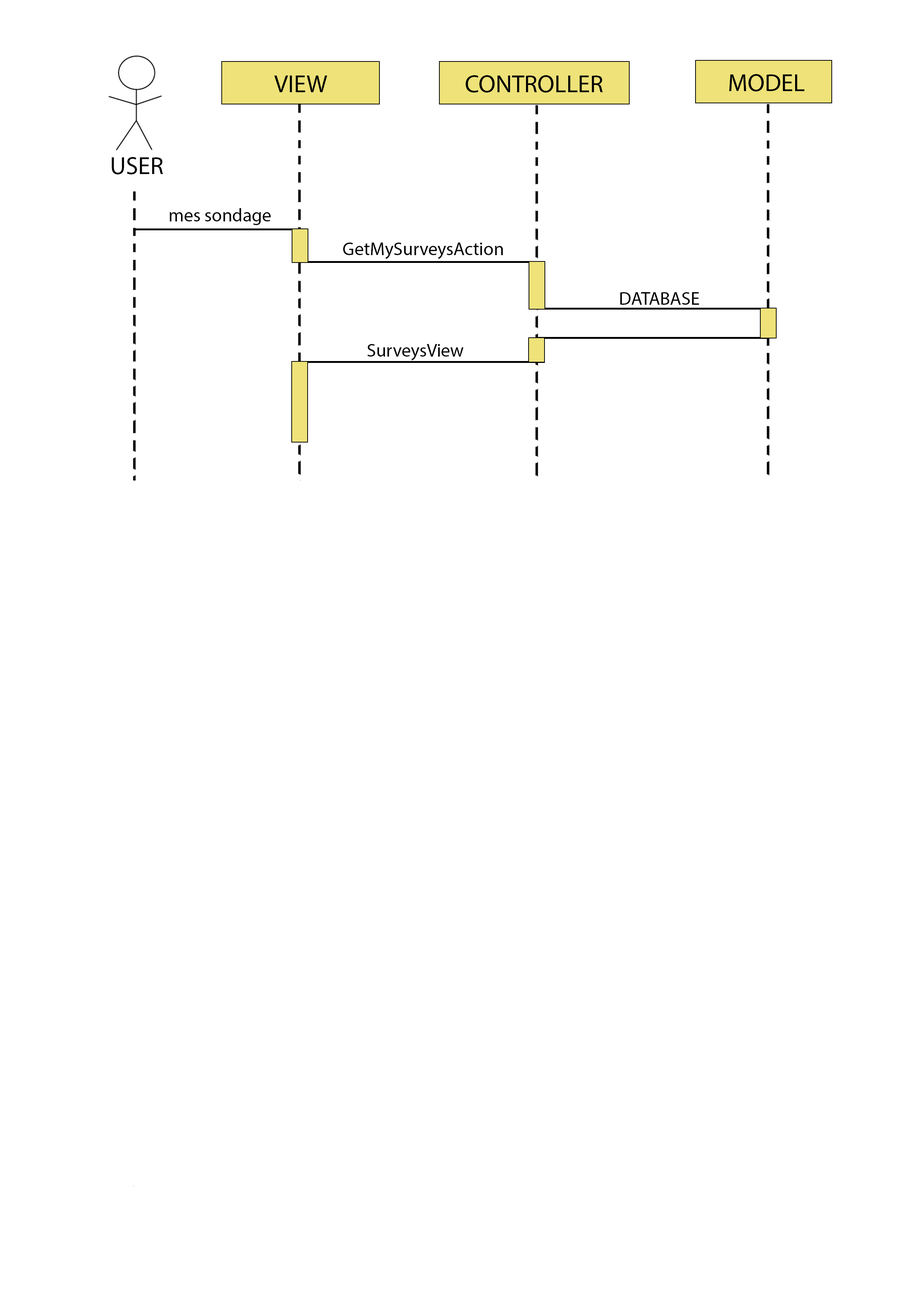
<style>
.page{position:relative;width:918px;height:1299px;background:#ffffff}
.page>*{position:absolute;margin:0}
.t1{font:24.7px "MyriadPro-Regular";color:#000000}
.t2{font:18.5px "MyriadPro-Regular";color:#000000}
</style>
<div class="page">
<p class="t1" style="left:274px;top:76px;width:53px;height:16px">VIEW</p>
<p class="t1" style="left:466px;top:75px;width:137px;height:18px">CONTROLLER</p>
<p class="t1" style="left:729px;top:74px;width:75px;height:17px">MODEL</p>
<p class="t1" style="left:112px;top:157px;width:51px;height:17px">USER</p>
<p class="t2" style="left:170px;top:208px;width:101px;height:17px">mes sondage</p>
<p class="t2" style="left:343px;top:242px;width:160px;height:17px">GetMySurveysAction</p>
<p class="t2" style="left:620px;top:292px;width:79px;height:13px">DATABASE</p>
<p class="t2" style="left:367px;top:344px;width:97px;height:17px">SurveysView</p>
</div>
